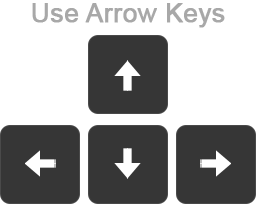
<style>
.page{position:relative;width:256px;height:204px;background:#ffffff}
.page>*{position:absolute;margin:0}
.t1{font:26px "ArialMT";color:#a8a8a8;font-weight:bold}
</style>
<div class="page">
<p class="t1" style="left:32px;top:3px;width:193px;height:25px">Use Arrow Keys</p>
</div>
